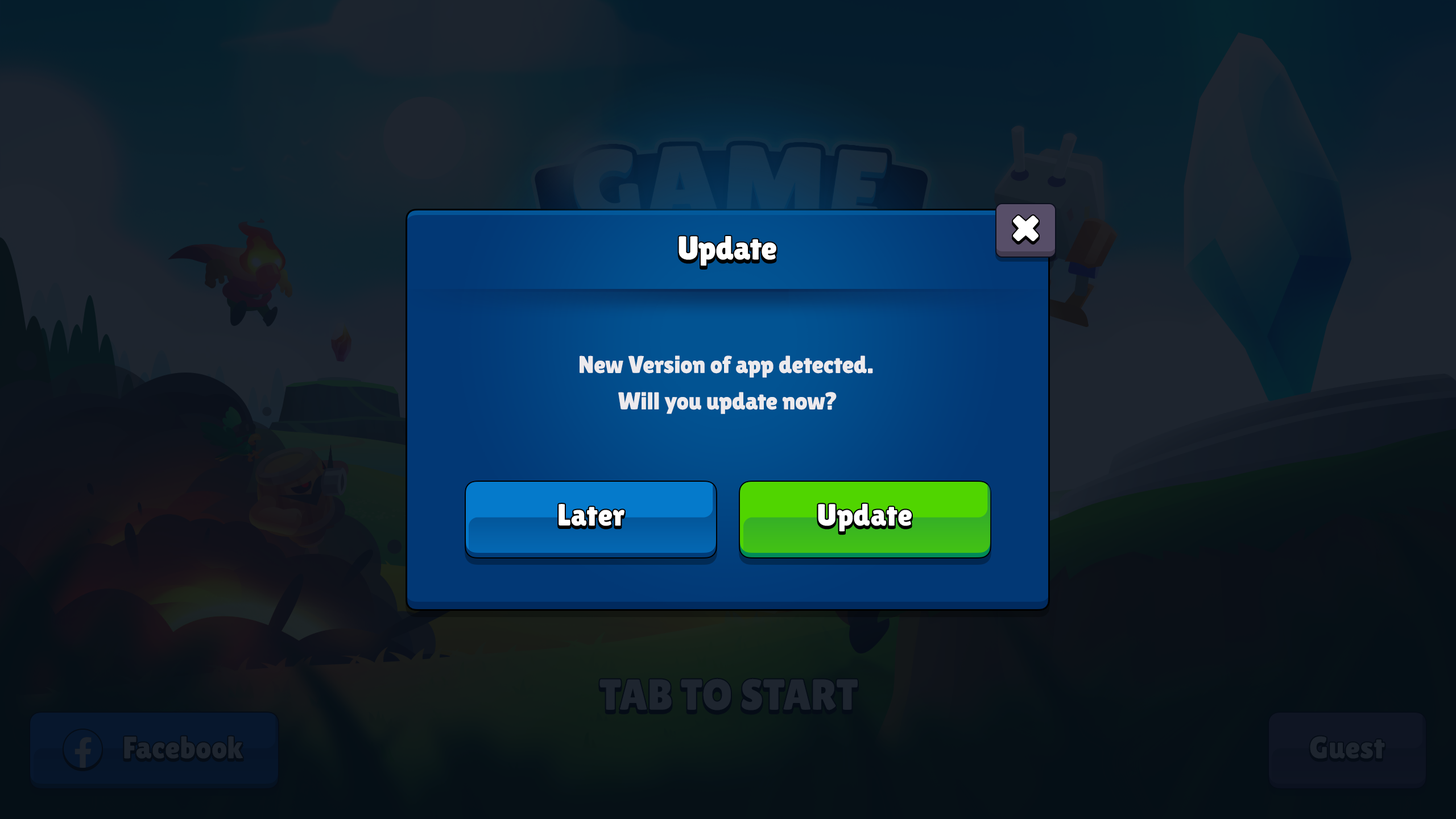
<style>
.page{position:relative;width:1456px;height:819px}
.page>*{position:absolute;margin:0}
.t1{font:33px "LilitaOne";color:#ffffff}
.t2{font:24.3px/36.4px "LilitaOne";color:#eceaed}
.t3{font:30.7px "LilitaOne";letter-spacing:0.02em;color:#ffffff}
</style>
<div class="page">
<p class="t1" style="left:679px;top:236px;width:97px;height:30px">Update</p>
<p class="t2" style="left:580px;top:355px;width:293px;height:59px;text-align:center">New Version of app detected. <br>Will you update now?</p>
<p class="t3" style="left:559px;top:504px;width:65px;height:22px">Later</p>
<p class="t3" style="left:818px;top:503px;width:94px;height:29px">Update</p>
</div>
